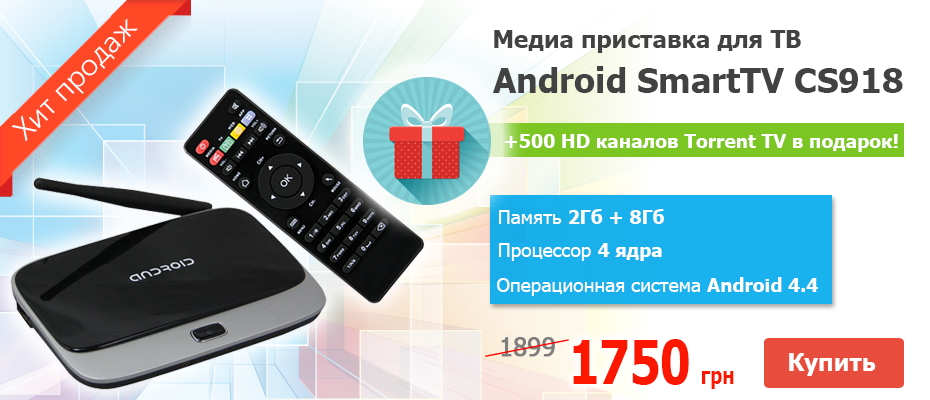
<style>
.page{position:relative;width:930px;height:400px;background:#ffffff}
.page>*{position:absolute;margin:0}
.t1{font:24px "Tahoma-Bold";color:#424242}
.t2{font:34px "Tahoma-Bold";color:#424242}
.t3{font:19.1px "Tahoma-Bold";color:#ffffff}
.t4{font:19.1px "Tahoma";color:#ffffff}
.t5{font:24.6px "Tahoma";color:#7e7e7e;font-weight:bold}
.t6{font:60px "Tahoma-Bold";color:#fc1800;scale:0.8 1}
.t7{font:23.9px "Tahoma-Bold";color:#fc1800;scale:0.8 1}
.t8{font:24px "Tahoma-Bold";color:#ffffff}
</style>
<div class="page">
<p class="t1" style="left:494px;top:30px;width:307px;height:23px">Медиа приставка для ТВ</p>
<p class="t2" style="left:493px;top:66px;width:410px;height:27px">Android SmartTV CS918</p>
<p class="t3" style="left:505px;top:134px;width:393px;height:18px">+500 HD каналов Torrent TV в подарок!</p>
<p class="t3" style="left:499px;top:209px;width:165px;height:15px"><span class="t4">Память </span>2Гб + 8Гб</p>
<p class="t4" style="left:499px;top:243px;width:163px;height:18px">Процессор <span class="t3">4 ядра</span></p>
<p class="t4" style="left:497px;top:277px;width:321px;height:19px">Операционная система <span class="t3">Android 4.4</span></p>
<p class="t5" style="left:501px;top:337px;width:54px;height:20px">1899</p>
<p class="t6" style="left:573px;top:339px;width:161px;height:50px">1750 <span class="t7">грн</span></p>
<p class="t8" style="left:789px;top:353px;width:87px;height:23px">Купить</p>
</div>
